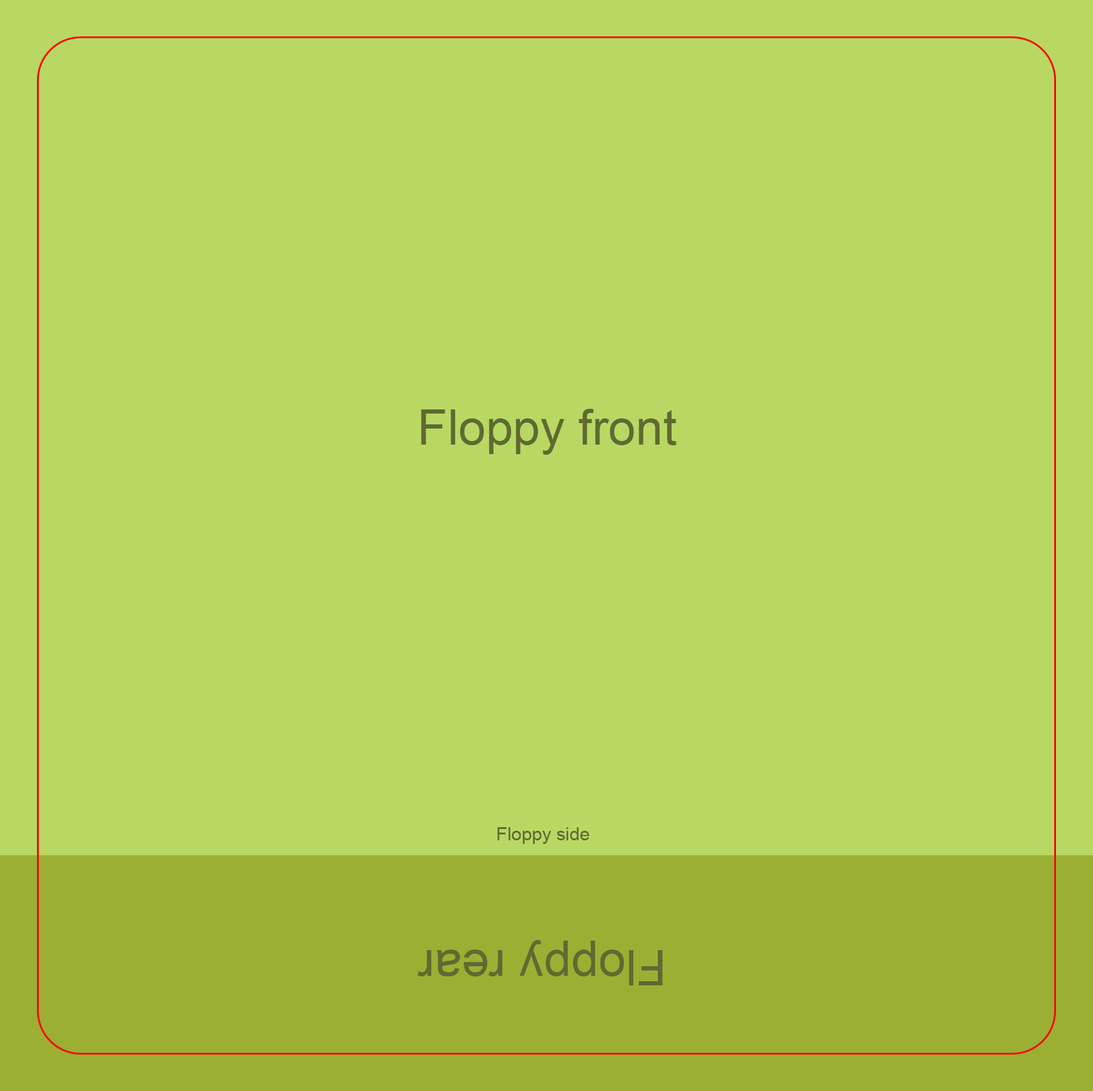
<style>
.page{position:relative;width:1093px;height:1091px;background:#b9d863}
.page>*{position:absolute;margin:0}
.t1{font:49.1px "ArialMT";color:#5f6a32}
.t2{font:18.3px "ArialMT";color:#5f6a32}
</style>
<div class="page">
<p class="t1" style="left:421px;top:409px;width:256px;height:46px">Floppy front</p>
<p class="t2" style="left:497px;top:827px;width:92px;height:17px">Floppy side</p>
<p class="t1" style="left:417px;top:940px;width:246px;height:45px;rotate:-180deg">Floppy rear</p>
</div>
